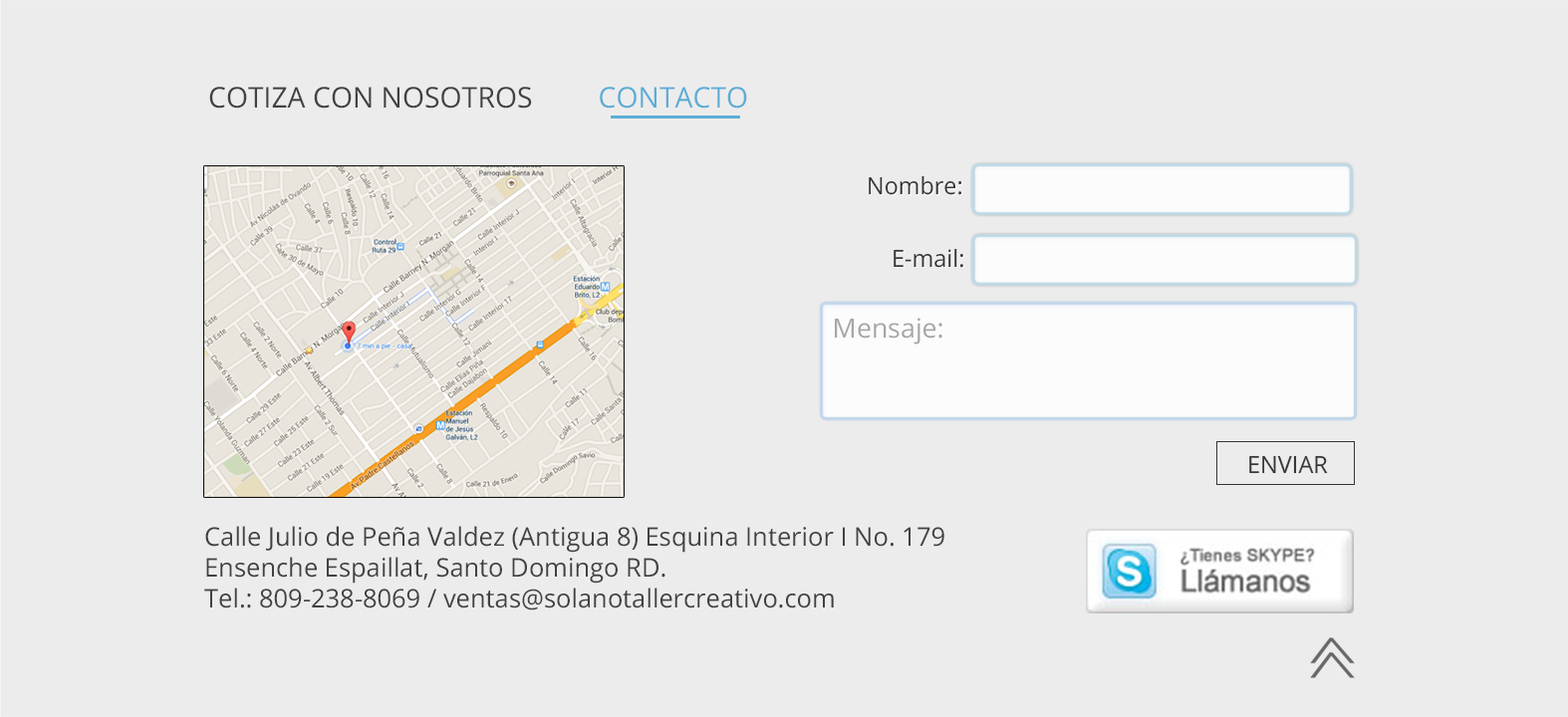
<style>
.page{position:relative;width:1568px;height:717px;background:#edecec}
.page>*{position:absolute;margin:0}
.t1{font:28.6px "OpenSans";color:#424141;text-transform:uppercase}
.t2{font:28.6px "OpenSans";color:#5cadd6;text-transform:uppercase}
.t3{font:23.5px "OpenSans";color:#363636}
.t4{font:26.6px "OpenSans";color:#a6a6a6}
.t5{font:23.8px "OpenSans";color:#363636;text-transform:uppercase}
.t6{font:25.7px "OpenSans";color:#424141}
.t7{font:25.7px "OpenSans";color:#424141;text-transform:uppercase}
</style>
<div class="page">
<p class="t1" style="left:209px;top:87px;width:538px;height:22px">cotiza con nosotros<span class="t2">       contacto</span></p>
<p class="t3" style="left:869px;top:175px;width:93px;height:20px">Nombre:</p>
<p class="t3" style="left:894px;top:248px;width:69px;height:20px">E-mail:</p>
<p class="t4" style="left:835px;top:318px;width:107px;height:27px">Mensaje:</p>
<p class="t5" style="left:1249px;top:455px;width:79px;height:19px">enviar</p>
<p class="t6" style="left:204px;top:526px;width:740px;height:85px"><span class="t7">C</span>alle Julio de Peña Valdez (Antigua 8) Esquina Interior I No. 179<br>Ensenche Espaillat, Santo Domingo RD.<br>Tel.: 809-238-8069 / ventas@solanotallercreativo.com</p>
</div>
